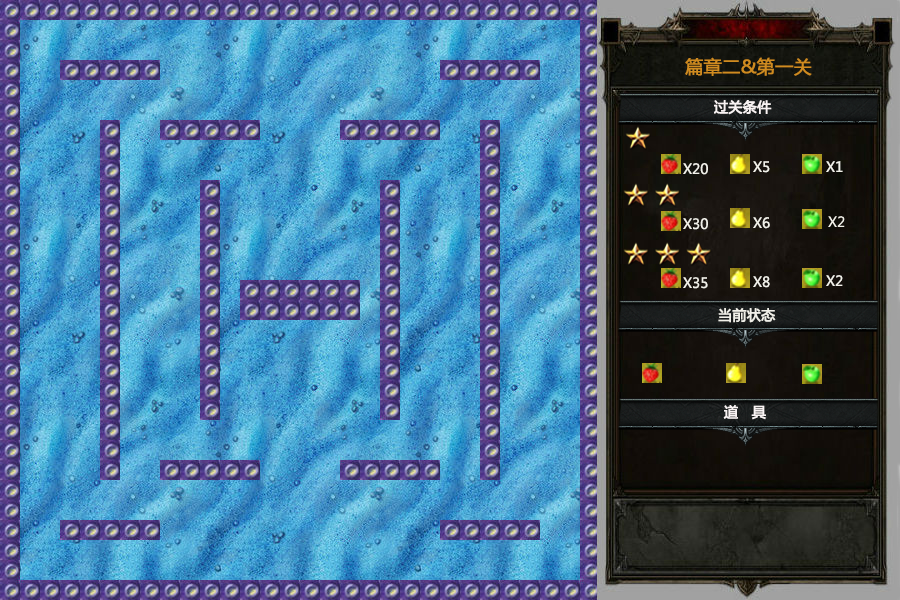
<style>
.page{position:relative;width:900px;height:600px}
.page>*{position:absolute;margin:0}
.t1{font:18px "MicrosoftYaHei";color:#cf8b20;font-weight:bold}
.t2{font:14px "MicrosoftYaHei";color:#f9f3f3;font-weight:bold}
.t3{font:14px "MicrosoftYaHei";color:#f1f0e9}
.t4{font:14px "MicrosoftYaHei";color:#f1f0e9;font-weight:bold}
</style>
<div class="page">
<p class="t1" style="left:685px;top:57px;width:127px;height:19px">篇章二&amp;第一关</p>
<p class="t2" style="left:714px;top:100px;width:58px;height:15px">过关条件</p>
<p class="t3" style="left:753px;top:161px;width:17px;height:12px">X5</p>
<p class="t3" style="left:826px;top:161px;width:17px;height:11px">X1</p>
<p class="t3" style="left:683px;top:163px;width:25px;height:12px">X20</p>
<p class="t3" style="left:683px;top:218px;width:25px;height:12px">X30</p>
<p class="t3" style="left:753px;top:217px;width:17px;height:12px">X6</p>
<p class="t3" style="left:683px;top:277px;width:25px;height:12px">X35</p>
<p class="t3" style="left:753px;top:276px;width:17px;height:12px">X8</p>
<p class="t3" style="left:826px;top:275px;width:17px;height:11px">X2</p>
<p class="t4" style="left:718px;top:308px;width:58px;height:15px">当前状态</p>
<p class="t2" style="left:723px;top:405px;width:43px;height:15px">道   具</p>
</div>
